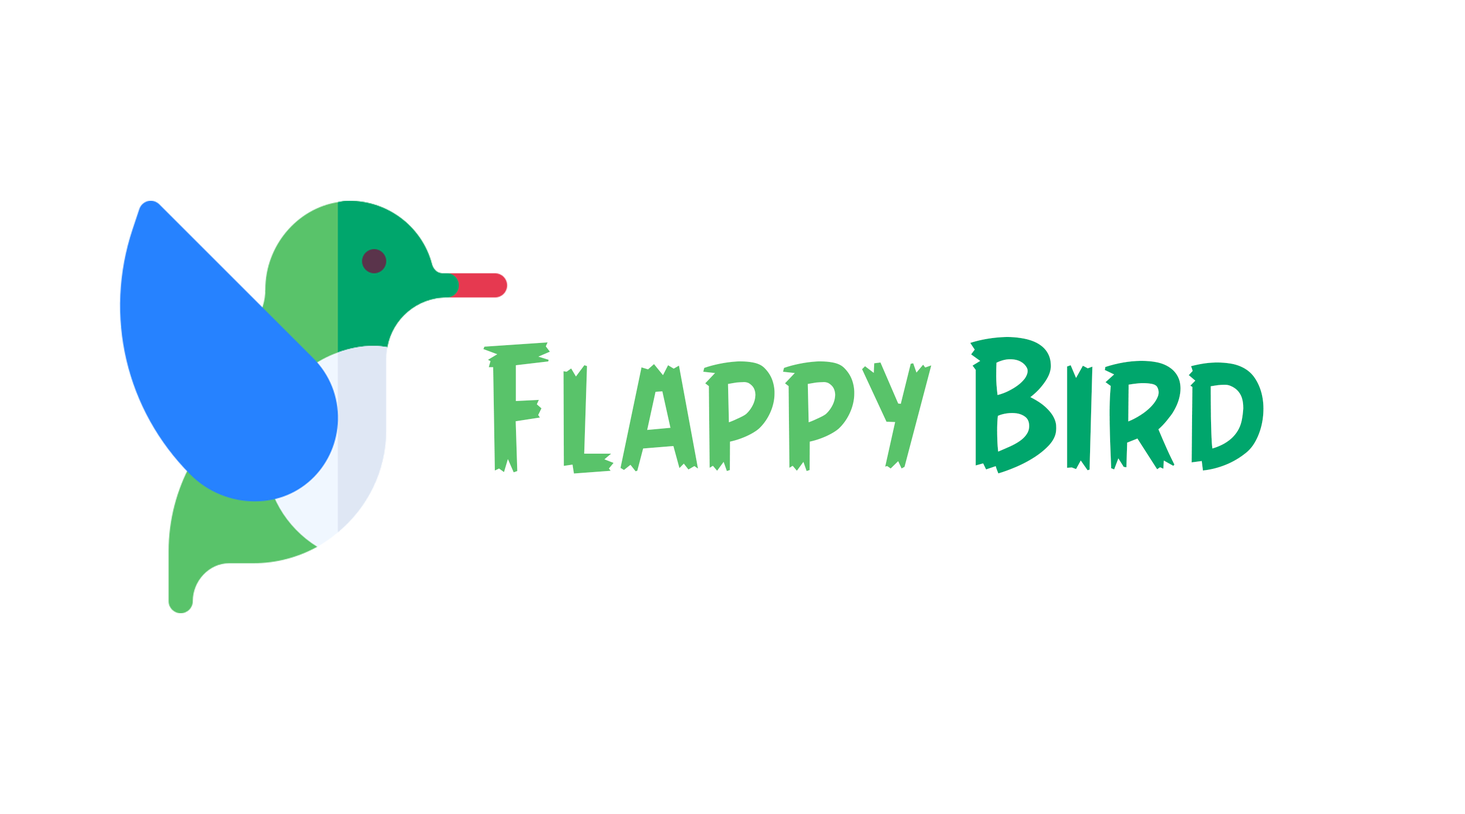
<style>
.page{position:relative;width:1465px;height:814px;background:#ffffff}
.page>*{position:absolute;margin:0}
.t1{font:162.8px "AngryBirds-Regular";color:#00a66c}
.t2{font:162.8px "AngryBirds-Regular";color:#59c36a}
</style>
<div class="page">
<p class="t1" style="left:970px;top:337px;width:294px;height:137px">Bird</p>
<p class="t2" style="left:483px;top:342px;width:449px;height:132px">Flappy</p>
</div>
